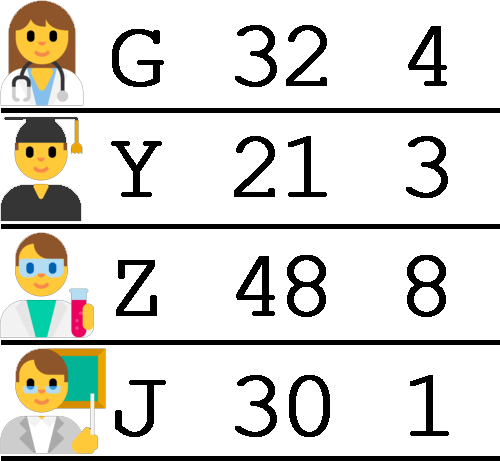
<style>
.page{position:relative;width:500px;height:461px;background:#ffffff}
.page>*{position:absolute;margin:0}
.t1{font:96.2px "CourierNewPSMT";color:#000000;font-weight:bold}
</style>
<div class="page">
<p class="t1" style="left:112px;top:25px;width:335px;height:62px">G 32 4</p>
<p class="t1" style="left:111px;top:136px;width:337px;height:62px">Y 21 3</p>
<p class="t1" style="left:116px;top:255px;width:330px;height:62px">Z 48 8</p>
<p class="t1" style="left:115px;top:375px;width:334px;height:62px">J 30 1</p>
</div>
